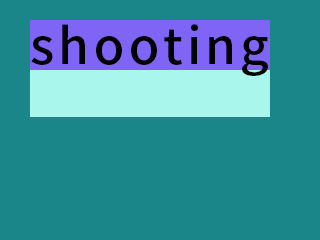
<style>
.page{position:relative;width:320px;height:240px;background:#1b868a}
.page>*{position:absolute;margin:0}
.t1{font:50px "SourceHanSans-Medium";letter-spacing:0.1em;color:#000000}
</style>
<div class="page">
<p class="t1" style="left:31px;top:24px;width:237px;height:52px">shooting</p>
</div>
